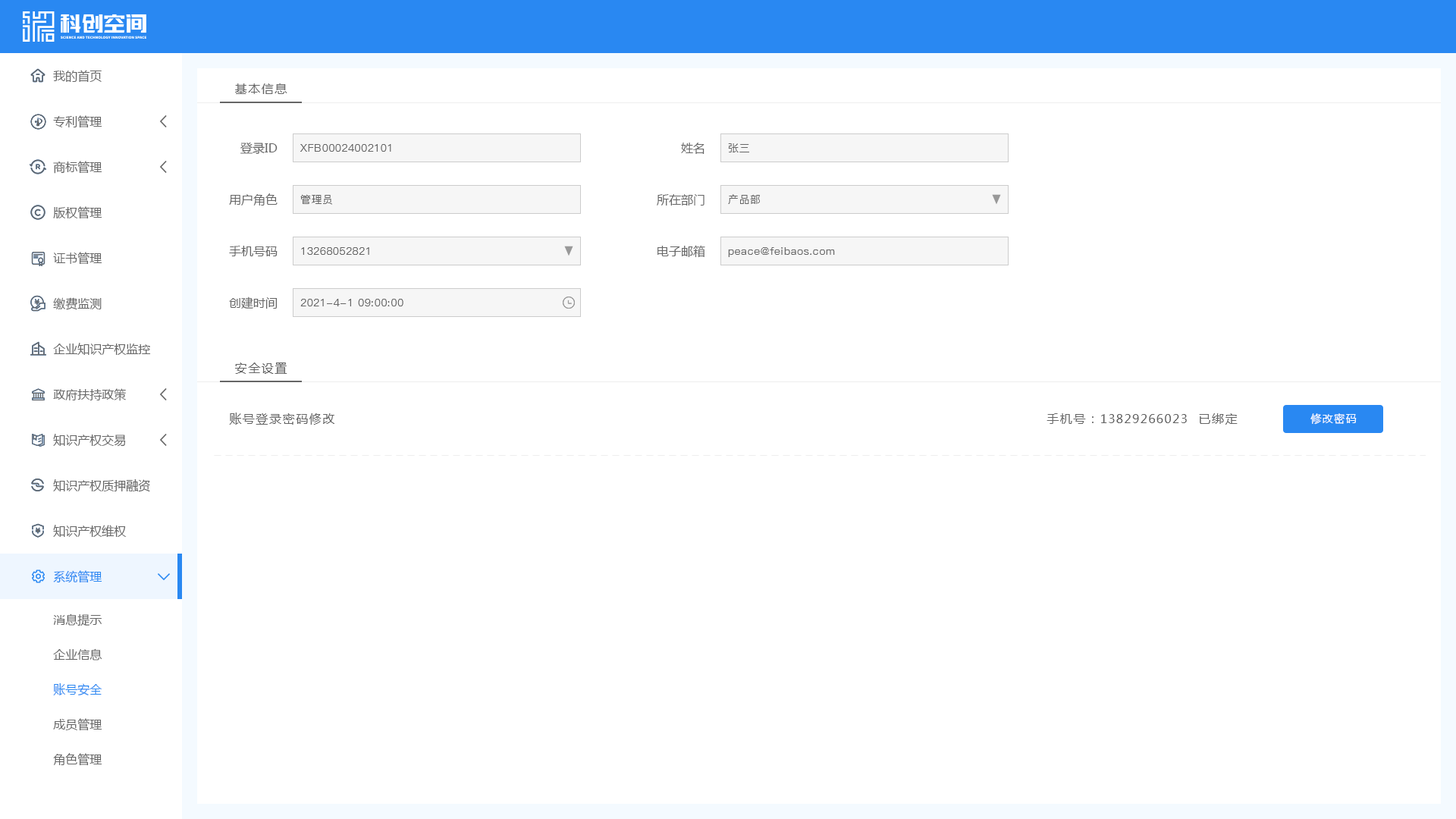
<style>
.page{position:relative;width:1456px;height:819px;background:#ffffff}
.page>*{position:absolute;margin:0}
.t1{font:12.1px "MicrosoftYaHei";color:#666666}
.t2{font:12.1px "MicrosoftYaHei";letter-spacing:0.1em;color:#666666}
.t3{font:10.6px "PingFang-SC-Medium";letter-spacing:0.04em;color:#666666}
.t4{font:10.6px "MicrosoftYaHei";letter-spacing:0.1em;color:#ffffff}
.t5{font:12.1px "MicrosoftYaHei";color:#2988f2}
</style>
<div class="page">
<p class="t1" style="left:53px;top:70px;width:49px;height:13px">我的首页</p>
<p class="t2" style="left:235px;top:83px;width:52px;height:11px">基本信息</p>
<p class="t1" style="left:53px;top:115px;width:49px;height:13px">专利管理</p>
<p class="t1" style="left:240px;top:142px;width:38px;height:12px">登录ID</p>
<p class="t3" style="left:300px;top:144px;width:91px;height:8px">XFB00024002101</p>
<p class="t1" style="left:681px;top:143px;width:23px;height:11px">姓名</p>
<p class="t3" style="left:728px;top:143px;width:21px;height:9px">张三</p>
<p class="t1" style="left:53px;top:161px;width:49px;height:13px">商标管理</p>
<p class="t1" style="left:229px;top:193px;width:49px;height:13px">用户角色</p>
<p class="t3" style="left:300px;top:194px;width:32px;height:11px">管理员</p>
<p class="t1" style="left:657px;top:194px;width:47px;height:12px">所在部门</p>
<p class="t3" style="left:728px;top:194px;width:32px;height:10px">产品部</p>
<p class="t1" style="left:53px;top:206px;width:49px;height:13px">版权管理</p>
<p class="t1" style="left:229px;top:246px;width:49px;height:10px">手机号码</p>
<p class="t1" style="left:657px;top:245px;width:48px;height:13px">电子邮箱</p>
<p class="t1" style="left:53px;top:252px;width:49px;height:13px">证书管理</p>
<p class="t3" style="left:301px;top:247px;width:68px;height:8px">13268052821</p>
<p class="t3" style="left:728px;top:247px;width:107px;height:10px">peace@feibaos.com</p>
<p class="t1" style="left:53px;top:297px;width:49px;height:13px">缴费监测</p>
<p class="t1" style="left:229px;top:297px;width:49px;height:12px">创建时间</p>
<p class="t3" style="left:300px;top:299px;width:103px;height:7px">2021-4-1 09:00:00</p>
<p class="t1" style="left:53px;top:343px;width:98px;height:12px">企业知识产权监控</p>
<p class="t2" style="left:235px;top:362px;width:52px;height:12px">安全设置</p>
<p class="t1" style="left:53px;top:388px;width:73px;height:13px">政府扶持政策</p>
<p class="t2" style="left:229px;top:413px;width:105px;height:12px">账号登录密码修改</p>
<p class="t2" style="left:1046px;top:413px;width:192px;height:12px">手机号：13829266023  已绑定</p>
<p class="t4" style="left:1310px;top:413px;width:47px;height:12px">修改密码</p>
<p class="t1" style="left:53px;top:434px;width:73px;height:13px">知识产权交易</p>
<p class="t1" style="left:53px;top:479px;width:97px;height:13px">知识产权质押融资</p>
<p class="t1" style="left:53px;top:525px;width:74px;height:13px">知识产权维权</p>
<p class="t5" style="left:53px;top:570px;width:49px;height:13px">系统管理</p>
<p class="t1" style="left:53px;top:613px;width:49px;height:13px">消息提示</p>
<p class="t1" style="left:53px;top:648px;width:49px;height:12px">企业信息</p>
<p class="t5" style="left:53px;top:683px;width:49px;height:12px">账号安全</p>
<p class="t1" style="left:53px;top:718px;width:49px;height:13px">成员管理</p>
<p class="t1" style="left:53px;top:753px;width:49px;height:13px">角色管理</p>
</div>
